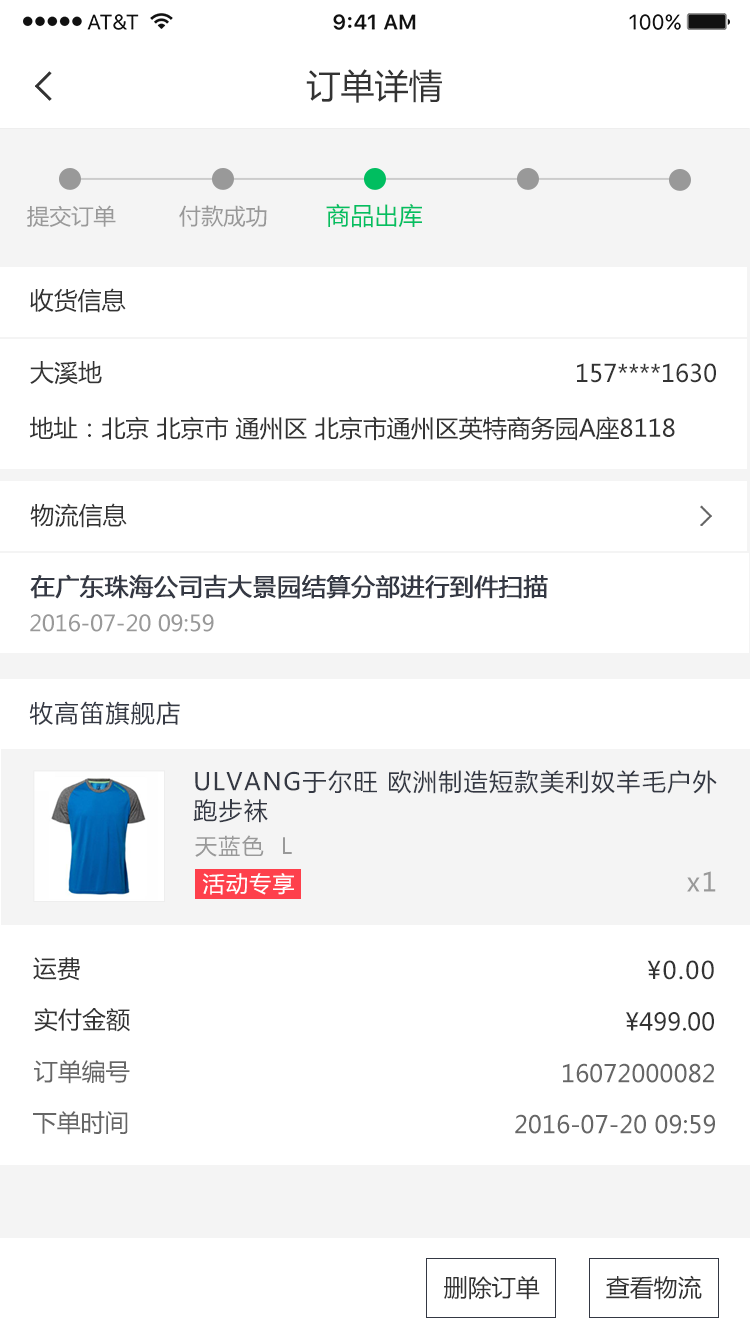
<style>
.page{position:relative;width:750px;height:1334px;background:#ffffff}
.page>*{position:absolute;margin:0}
.t1{font:34px "MicrosoftYaHei";color:#333333}
.t2{font:22px "MicrosoftYaHei";color:#999999}
.t3{font:24px "MicrosoftYaHei";color:#03bf61}
.t4{font:24px "MicrosoftYaHei";color:#333333}
.t5{font:24px "MicrosoftYaHei";color:#343843;font-weight:bold}
.t6{font:24px "MicrosoftYaHei";letter-spacing:0.06em;color:#343843}
.t7{font:22px "MicrosoftYaHei";letter-spacing:0.06em;color:#999999}
.t8{font:22px "MicrosoftYaHei";letter-spacing:0.06em;color:#ffffff}
.t9{font:26px "MicrosoftYaHei";letter-spacing:0.06em;color:#999999}
.t10{font:24px "MicrosoftYaHei";letter-spacing:0.06em;color:#333333}
.t11{font:24px "MicrosoftYaHei";color:#666666}
</style>
<div class="page">
<p class="t1" style="left:306px;top:69px;width:136px;height:34px">订单详情</p>
<p class="t2" style="left:27px;top:205px;width:89px;height:22px">提交订单</p>
<p class="t2" style="left:179px;top:205px;width:88px;height:22px">付款成功</p>
<p class="t3" style="left:326px;top:203px;width:96px;height:25px">商品出库</p>
<p class="t4" style="left:30px;top:288px;width:96px;height:25px">收货信息</p>
<p class="t4" style="left:30px;top:361px;width:72px;height:24px">大溪地</p>
<p class="t4" style="left:577px;top:363px;width:139px;height:20px">157****1630</p>
<p class="t4" style="left:29px;top:416px;width:646px;height:25px">地址：北京 北京市 通州区 北京市通州区英特商务园A座8118</p>
<p class="t4" style="left:30px;top:503px;width:97px;height:25px">物流信息</p>
<p class="t5" style="left:30px;top:574px;width:518px;height:25px">在广东珠海公司吉大景园结算分部进行到件扫描</p>
<p class="t2" style="left:30px;top:614px;width:184px;height:18px">2016-07-20 09:59</p>
<p class="t6" style="left:29px;top:701px;width:151px;height:24px">牧高笛旗舰店</p>
<p class="t6" style="left:193px;top:770px;width:524px;height:53px">ULVANG于尔旺 欧洲制造短款美利奴羊毛户外跑步袜</p>
<p class="t7" style="left:195px;top:835px;width:97px;height:22px">天蓝色  L</p>
<p class="t8" style="left:202px;top:873px;width:92px;height:22px">活动专享</p>
<p class="t9" style="left:687px;top:871px;width:29px;height:21px">x1</p>
<p class="t4" style="left:33px;top:957px;width:47px;height:24px">运费</p>
<p class="t10" style="left:647px;top:960px;width:67px;height:20px">¥0.00</p>
<p class="t4" style="left:34px;top:1008px;width:96px;height:24px">实付金额</p>
<p class="t4" style="left:626px;top:1012px;width:88px;height:19px">¥499.00</p>
<p class="t11" style="left:34px;top:1060px;width:96px;height:24px">订单编号</p>
<p class="t11" style="left:563px;top:1063px;width:151px;height:20px">16072000082</p>
<p class="t11" style="left:33px;top:1111px;width:95px;height:24px">下单时间</p>
<p class="t11" style="left:515px;top:1114px;width:200px;height:20px">2016-07-20 09:59</p>
<p class="t4" style="left:444px;top:1276px;width:96px;height:24px">删除订单</p>
<p class="t4" style="left:606px;top:1275px;width:96px;height:25px">查看物流</p>
</div>
